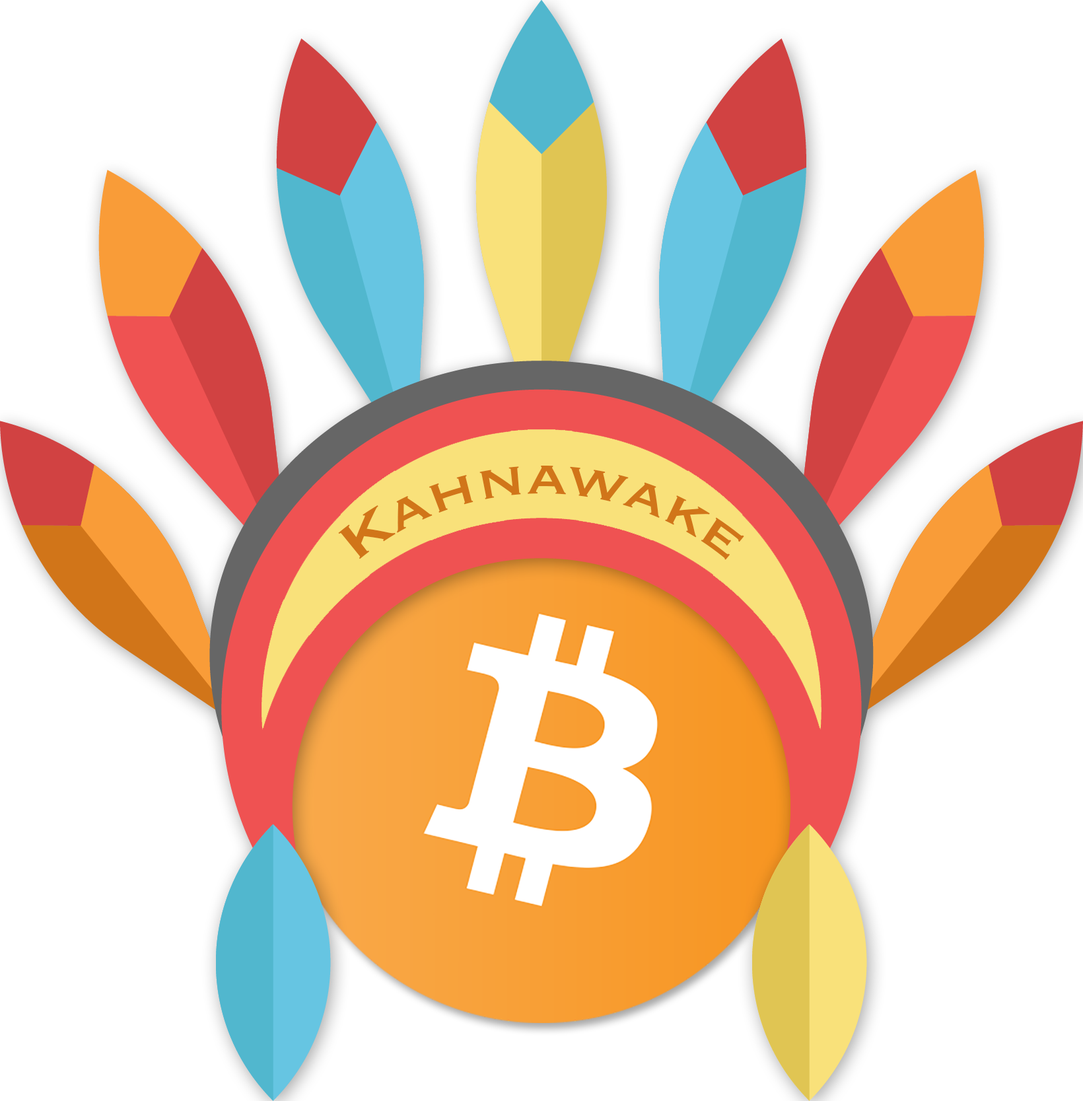
<style>
.page{position:relative;width:1083px;height:1101px;background:#ffffff}
.page>*{position:absolute;margin:0}
.t1{font:63.3px "Copperplate";color:#d17519}
</style>
<div class="page">
<p class="t1" style="left:338px;top:466px;width:406px;height:94px">Kahnawake</p>
</div>
